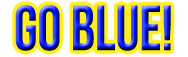
<style>
.page{position:relative;width:188px;height:57px;background:#ffee1f}
.page>*{position:absolute;margin:0}
.t1{font:63.6px "BebasNeue";scale:0.95 1}
</style>
<div class="page">
<p class="t1" style="left:15px;top:5px;width:156px;height:46px">Go Blue!</p>
</div>
